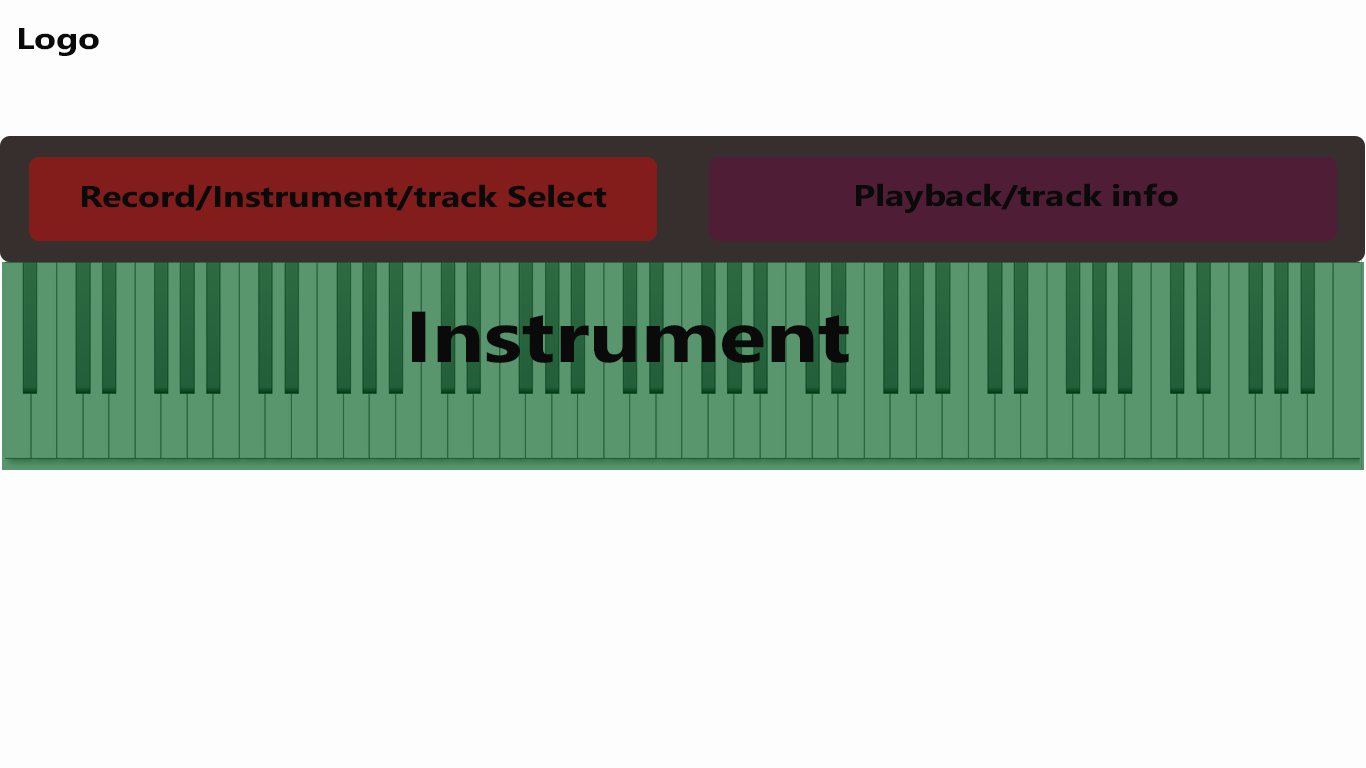
<style>
.page{position:relative;width:1366px;height:768px;background:#fdfdfd}
.page>*{position:absolute;margin:0}
.t1{font:30px "SegoeWP-Bold";letter-spacing:-0.005em;color:#0a0a0a;scale:1.2 1}
.t2{font:72px "SegoeWP-Bold";letter-spacing:-0.005em;color:#0a0a0a;scale:1.2 1}
</style>
<div class="page">
<p class="t1" style="left:19px;top:28px;width:80px;height:28px">Logo</p>
<p class="t1" style="left:82px;top:184px;width:525px;height:27px">Record/Instrument/track Select</p>
<p class="t1" style="left:856px;top:183px;width:322px;height:30px">Playback/track info</p>
<p class="t2" style="left:412px;top:311px;width:437px;height:52px">Instrument</p>
</div>
